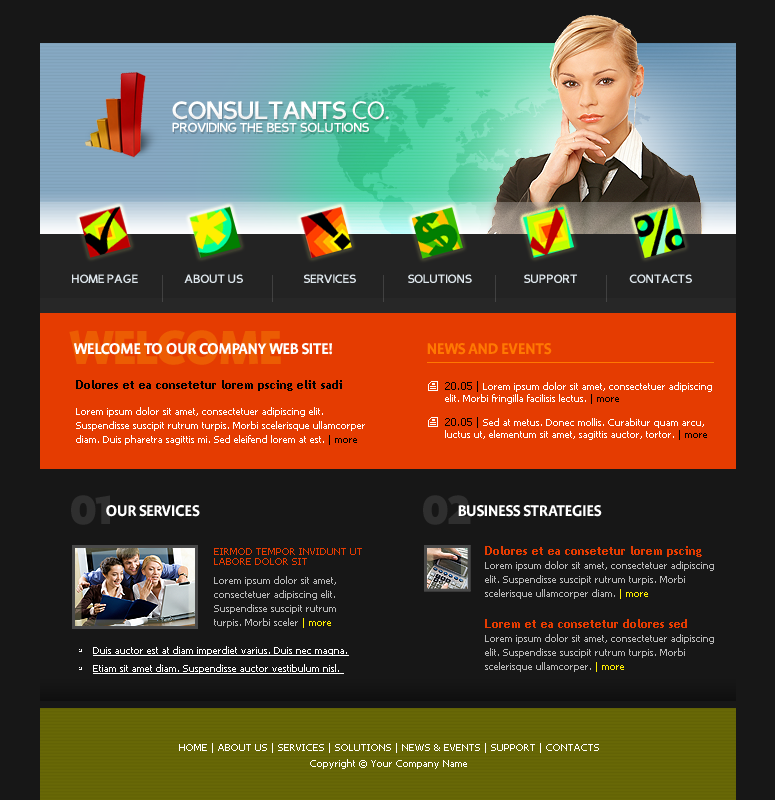
<style>
.page{position:relative;width:775px;height:800px;background:#171717}
.page>*{position:absolute;margin:0}
.t1{font:25px "PerspectiveSansBold";letter-spacing:-0.04em;color:#fcfcfc;text-transform:uppercase}
.t2{font:25px "PerspectiveSans";letter-spacing:-0.04em;color:#fcfcfc;text-transform:uppercase}
.t3{font:13px "PerspectiveSansBold";letter-spacing:-0.04em;color:#fdfdfd;text-transform:uppercase}
.t4{font:12px "PerspectiveSansBold";letter-spacing:-0.04em;color:#dee7ed;text-transform:uppercase}
.t5{font:55px "Profile-Black";letter-spacing:-0.04em;color:#ec5c03;text-transform:uppercase}
.t6{font:18px "Profile-Bold";letter-spacing:-0.04em;color:#ffffff;text-transform:uppercase}
.t7{font:18px "Profile-Bold";letter-spacing:-0.04em;color:#ff7802;text-transform:uppercase}
.t8{font:10px/14px "Tahoma";color:#ffffff}
.t9{font:12px/12px "TrebuchetMS-Bold";color:#000000}
.t10{font:10px/14px "Tahoma";color:#000000}
.t11{font:10px/12px "Tahoma";color:#ffffff}
.t12{font:11px/12px "Tahoma";color:#000000}
.t13{font:10px/12px "Tahoma";color:#000000}
.t14{font:55px "Profile-Black";letter-spacing:-0.04em;color:#2f2f2f;text-transform:uppercase}
.t15{font:10px "Tahoma";color:#e53c01;text-transform:uppercase}
.t16{font:10px/14px "Tahoma";color:#b6b6b6}
.t17{font:12px/12px "TrebuchetMS-Bold";color:#e53c01}
.t18{font:10px/14px "Tahoma";color:#ffee00}
.t19{font:10px/18px "Tahoma";color:#ffffff;text-decoration:underline}
.t20{font:10px/16px "Tahoma";color:#ffffff}
</style>
<div class="page">
<p class="t1" style="left:172px;top:101px;width:217px;height:19px">CONSULTANTS <span class="t2">co.</span></p>
<p class="t3" style="left:172px;top:122px;width:197px;height:10px">PROVIDING THE BEST SOLUTIONS</p>
<p class="t4" style="left:72px;top:274px;width:66px;height:9px">HOME PAGE</p>
<p class="t4" style="left:184px;top:274px;width:59px;height:9px">ABOUT US</p>
<p class="t4" style="left:303px;top:274px;width:53px;height:9px">SERVICES</p>
<p class="t4" style="left:408px;top:274px;width:64px;height:9px">SOLUTIONS</p>
<p class="t4" style="left:524px;top:274px;width:53px;height:9px">SUPPORT</p>
<p class="t4" style="left:629px;top:274px;width:63px;height:9px">CONTACTS</p>
<p class="t5" style="left:69px;top:330px;width:212px;height:35px">WELCOME</p>
<p class="t6" style="left:73px;top:343px;width:259px;height:12px">WELCOME TO OUR COMPANY WEB SITE!</p>
<p class="t7" style="left:427px;top:343px;width:125px;height:12px">NEWS AND EVENTS</p>
<p class="t8" style="left:76px;top:380px;width:289px;height:65px"><span class="t9">Dolores et ea consetetur lorem pscing elit sadi <br><br></span>Lorem ipsum dolor sit amet, consectetuer adipiscing elit. Suspendisse suscipit rutrum turpis. Morbi scelerisque ullamcorper diam. Duis pharetra sagittis mi. Sed eleifend lorem at est. <span class="t10">| more</span></p>
<p class="t11" style="left:445px;top:381px;width:267px;height:59px"><span class="t12">20.05 | </span>Lorem ipsum dolor sit amet, consectetuer adipiscing elit. Morbi fringilla facilisis lectus. <span class="t13">| more<br><br></span><span class="t12">20.05 |</span> Sed at metus. Donec mollis. Curabitur quam arcu, luctus ut, elementum sit amet, sagittis auctor, tortor. <span class="t13">| more</span></p>
<p class="t14" style="left:71px;top:495px;width:39px;height:30px">01</p>
<p class="t6" style="left:106px;top:505px;width:94px;height:12px">OUR SERVICES</p>
<p class="t6" style="left:458px;top:505px;width:144px;height:12px">BUSINESS STRATEGIES</p>
<p class="t15" style="left:214px;top:548px;width:148px;height:17px">Eirmod tempor invidunt Ut labore dolor sit</p>
<p class="t16" style="left:485px;top:546px;width:229px;height:53px"><span class="t17">Dolores et ea consetetur lorem pscing <br></span>Lorem ipsum dolor sit amet, consectetuer adipiscing elit. Suspendisse suscipit rutrum turpis. Morbi scelerisque ullamcorper diam.<span class="t18"> | more</span></p>
<p class="t16" style="left:214px;top:576px;width:122px;height:52px">Lorem ipsum dolor sit amet, consectetuer adipiscing elit. Suspendisse suscipit rutrum turpis. Morbi sceler<span class="t18"> | more</span></p>
<p class="t16" style="left:485px;top:619px;width:229px;height:53px"><span class="t17">Lorem et ea consetetur dolores sed<br></span>Lorem ipsum dolor sit amet, consectetuer adipiscing elit. Suspendisse suscipit rutrum turpis. Morbi scelerisque ullamcorper.<span class="t18"> | more</span></p>
<p class="t19" style="left:93px;top:646px;width:256px;height:28px">Duis auctor est at diam imperdiet varius. Duis nec magna. Etiam sit amet diam. Suspendisse auctor vestibulum nisl.</p>
<p class="t20" style="left:179px;top:743px;width:420px;height:26px;text-align:center">HOME | ABOUT US | SERVICES | SOLUTIONS | NEWS &amp; EVENTS | SUPPORT | CONTACTS<br>Copyright © Your Company Name</p>
</div>
